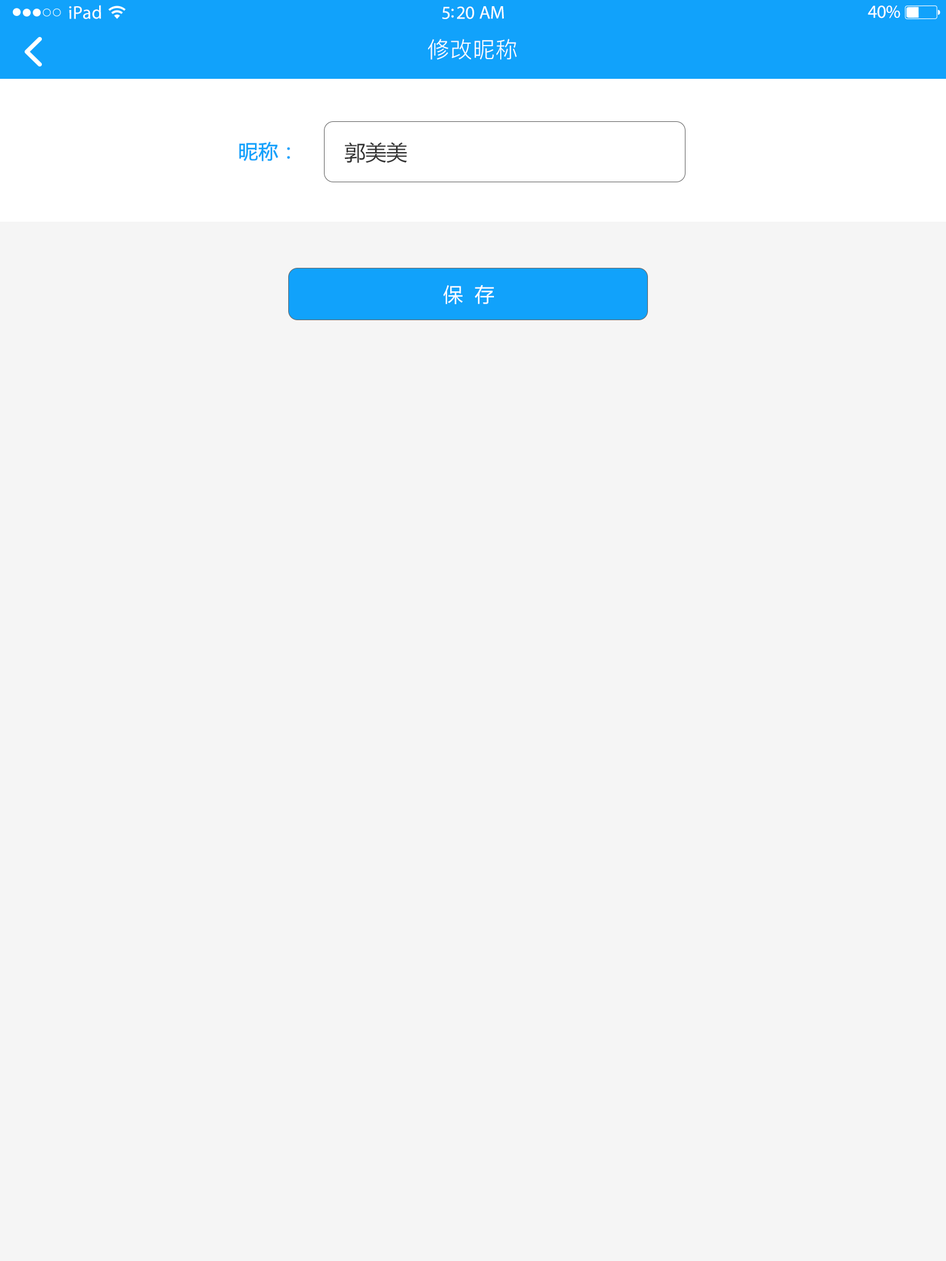
<style>
.page{position:relative;width:946px;height:1261px;background:#f5f5f5}
.page>*{position:absolute;margin:0}
.t1{font:18.5px "MyriadPro-Regular";letter-spacing:0.02em;color:#ffffff}
.t2{font:18.5px "MyriadPro-Regular";letter-spacing:-0.02em;color:#ffffff}
.t3{font:22.2px "PingFang-SC-Regular";letter-spacing:0.03em;color:#ffffff}
.t4{font:19.7px "MicrosoftYaHei";color:#11a2fb;font-weight:bold}
.t5{font:20.9px "MicrosoftYaHei";color:#333333}
.t6{font:19.7px "MicrosoftYaHei";color:#ffffff}
</style>
<div class="page">
<p class="t1" style="left:69px;top:5px;width:32px;height:14px">iPad</p>
<p class="t2" style="left:867px;top:6px;width:33px;height:12px">40%</p>
<p class="t2" style="left:442px;top:6px;width:62px;height:13px">5:20 AM</p>
<p class="t3" style="left:428px;top:39px;width:89px;height:21px">修改昵称</p>
<p class="t4" style="left:239px;top:142px;width:51px;height:19px">昵称：</p>
<p class="t5" style="left:344px;top:142px;width:63px;height:21px">郭美美</p>
<p class="t6" style="left:443px;top:285px;width:51px;height:19px">保  存</p>
</div>
